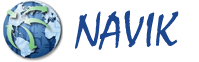
<style>
.page{position:relative;width:199px;height:62px;background:#ffffff}
.page>*{position:absolute;margin:0}
.t1{font:50px "Mistral";color:#1c468d}
</style>
<div class="page">
<p class="t1" style="left:75px;top:10px;width:104px;height:40px">NAVIK</p>
</div>
